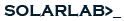
<style>
.page{position:relative;width:124px;height:21px;background:#ffffff}
.page>*{position:absolute;margin:0}
.t1{font:16px "CopperplateGothic-Bold";color:#041e2d}
</style>
<div class="page">
<p class="t1" style="left:4px;top:5px;width:118px;height:13px">SOLARLAB&gt;_</p>
</div>
